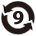
<style>
.page{position:relative;width:36px;height:36px;background:#ffffff}
.page>*{position:absolute;margin:0}
.t1{font:16px "AdobeGothicStd-Bold";letter-spacing:-0.04em;color:#231815;font-weight:bold;scale:1.24 1}
</style>
<div class="page">
<p class="t1" style="left:13px;top:11px;width:11px;height:14px">9</p>
</div>
